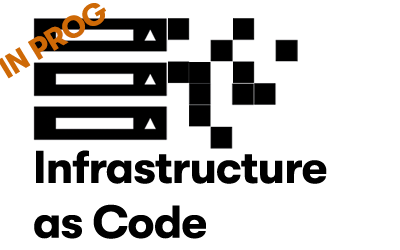
<style>
.page{position:relative;width:400px;height:250px;background:#ffffff}
.page>*{position:absolute;margin:0}
.t1{font:45.6px "GTWalsheimPro-Bold";letter-spacing:-0.02em;color:#000000}
</style>
<div class="page">
<p class="t1" style="left:34px;top:150px;width:293px;height:89px">Infrastructure<br>as Code</p>
</div>
